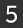
<style>
.page{position:relative;width:23px;height:28px;background:#333333}
.page>*{position:absolute;margin:0}
.t1{font:24px "Outfit-Regular";color:#ffffff;font-weight:bold;font-style:italic}
</style>
<div class="page">
<p class="t1" style="left:5px;top:5px;width:12px;height:18px">5</p>
</div>
